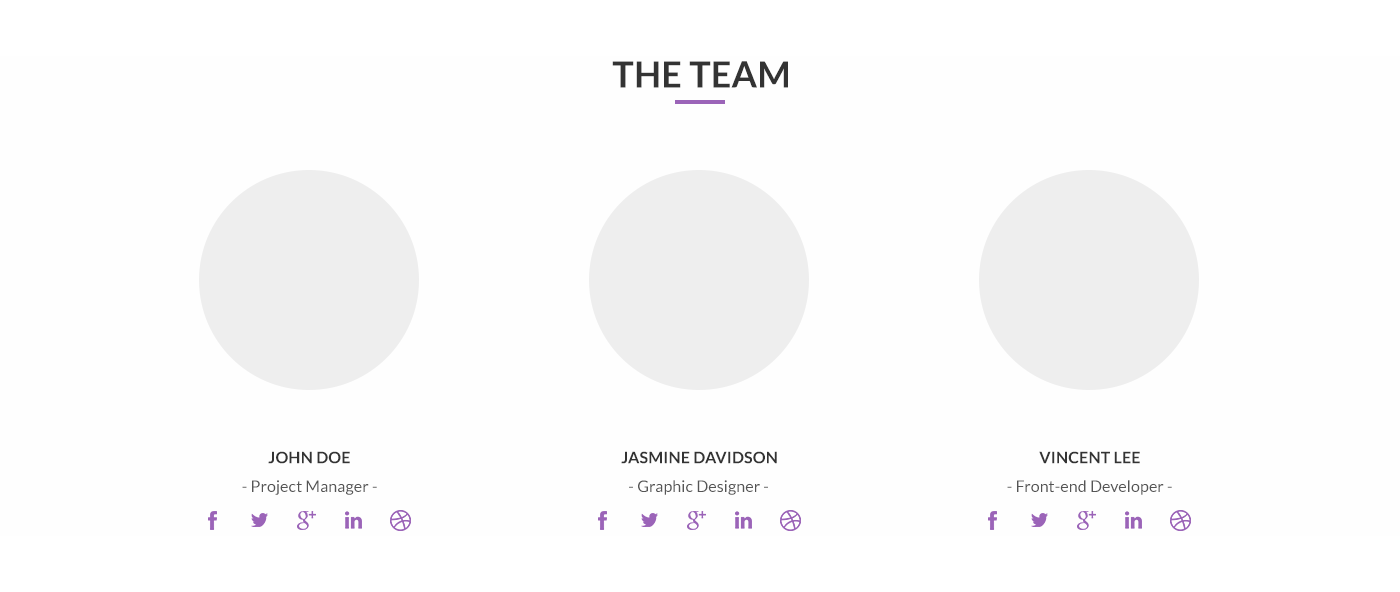
<style>
.page{position:relative;width:1400px;height:592px;background:#fefefe}
.page>*{position:absolute;margin:0}
.t1{font:36px "Lato-Bold";letter-spacing:0.005em;color:#333333}
.t2{font:16px "Lato-Bold";letter-spacing:0.01em;color:#333333}
.t3{font:16px "Lato-Regular";letter-spacing:0.005em;color:#555555}
</style>
<div class="page">
<p class="t1" style="left:612px;top:61px;width:176px;height:27px">THE TEAM</p>
<p class="t2" style="left:268px;top:451px;width:82px;height:13px">JOHN DOE</p>
<p class="t2" style="left:621px;top:451px;width:156px;height:13px">JASMINE DAVIDSON</p>
<p class="t2" style="left:1039px;top:451px;width:101px;height:13px">VINCENT LEE</p>
<p class="t3" style="left:242px;top:480px;width:135px;height:15px">- Project Manager -</p>
<p class="t3" style="left:629px;top:480px;width:139px;height:15px">- Graphic Designer -</p>
<p class="t3" style="left:1007px;top:480px;width:165px;height:15px">- Front-end Developer -</p>
</div>
